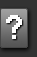
<style>
.page{position:relative;width:37px;height:57px;background:#333333}
.page>*{position:absolute;margin:0}
.t1{font:36px "Fixedsys";color:#ffffff}
</style>
<div class="page">
<p class="t1" style="left:6px;top:15px;width:16px;height:24px;rotate:1deg">?</p>
</div>
